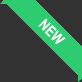
<style>
.page{position:relative;width:82px;height:82px;background:#333333}
.page>*{position:absolute;margin:0}
.t1{font:15px "ArialNarrow-Bold";color:#ffffff}
</style>
<div class="page">
<p class="t1" style="left:38px;top:18px;width:28px;height:27px;rotate:46deg">NEW</p>
</div>
